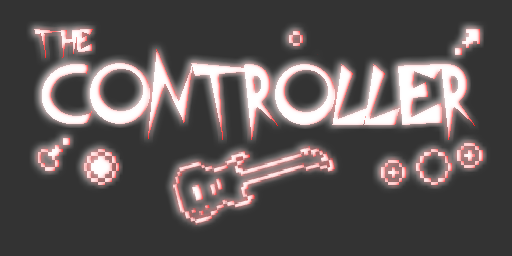
<style>
.page{position:relative;width:512px;height:256px;background:#333333}
.page>*{position:absolute;margin:0}
.t1{font:36px "Metropolis";letter-spacing:-0.025em}
.t2{font:96px "Metropolis";letter-spacing:-0.025em;color:#ffffff}
</style>
<div class="page">
<p class="t1" style="left:34px;top:29px;width:59px;height:29px">The</p>
<p class="t2" style="left:42px;top:49px;width:224px;height:91px">Cont</p>
<p class="t2" style="left:244px;top:64px;width:231px;height:76px">roller</p>
</div>
